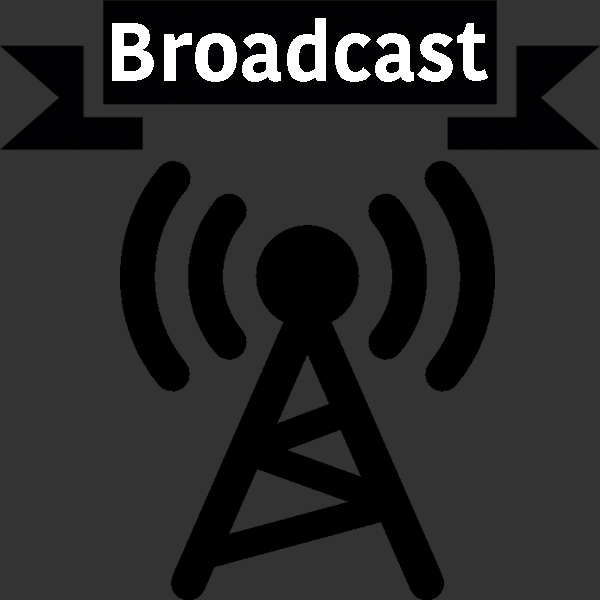
<style>
.page{position:relative;width:600px;height:600px;background:#333333}
.page>*{position:absolute;margin:0}
.t1{font:83.2px "KohinoorDevanagari-Bold";color:#ffffff}
</style>
<div class="page">
<p class="t1" style="left:112px;top:18px;width:376px;height:64px">Broadcast</p>
</div>
